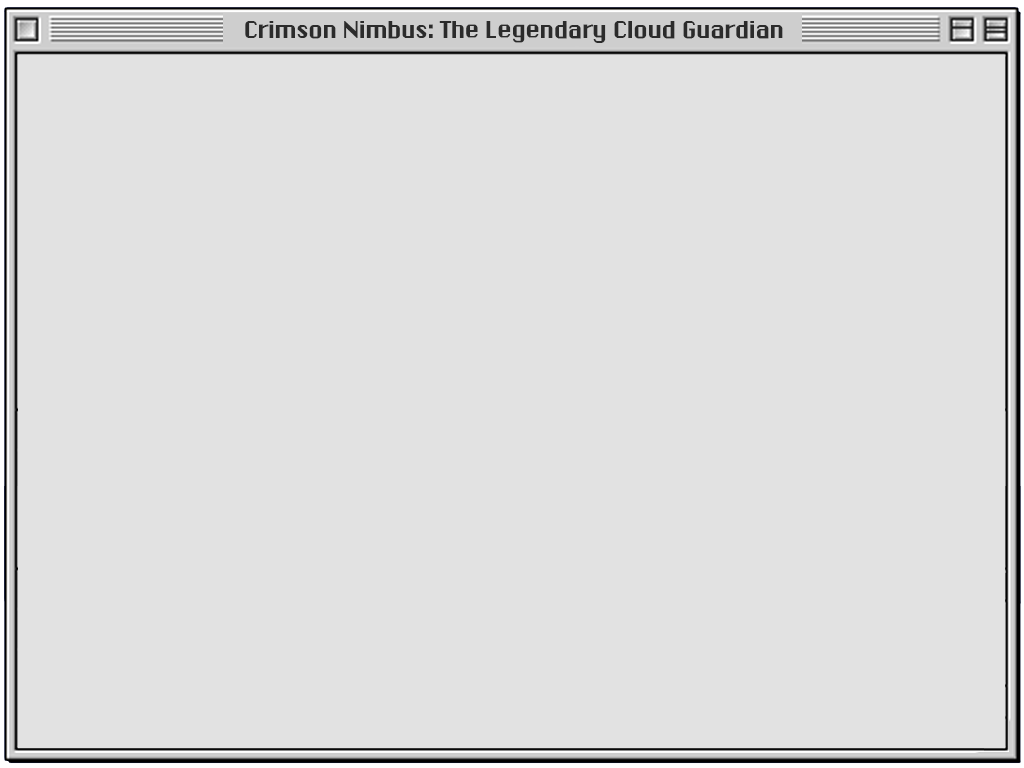
<style>
.page{position:relative;width:1024px;height:768px;background:#e2e2e2}
.page>*{position:absolute;margin:0}
.t1{font:22.5px "ChicagoFLF";letter-spacing:-0.04em;color:#2b2b2b}
</style>
<div class="page">
<p class="t1" style="left:245px;top:21px;width:538px;height:22px">Crimson Nimbus: The Legendary Cloud Guardian</p>
</div>
